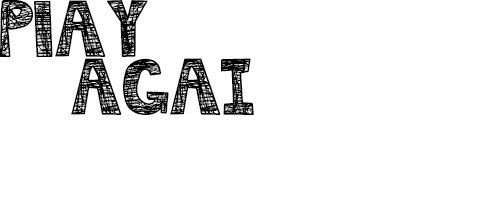
<style>
.page{position:relative;width:500px;height:200px;background:#ffffff}
.page>*{position:absolute;margin:0}
.t1{font:48px "DJBMessinMyHead-Bold";color:#000000}
</style>
<div class="page">
<p class="t1" style="left:0px;top:0px;width:254px;height:115px;text-align:right">PlAY<br>   AGAI</p>
</div>
